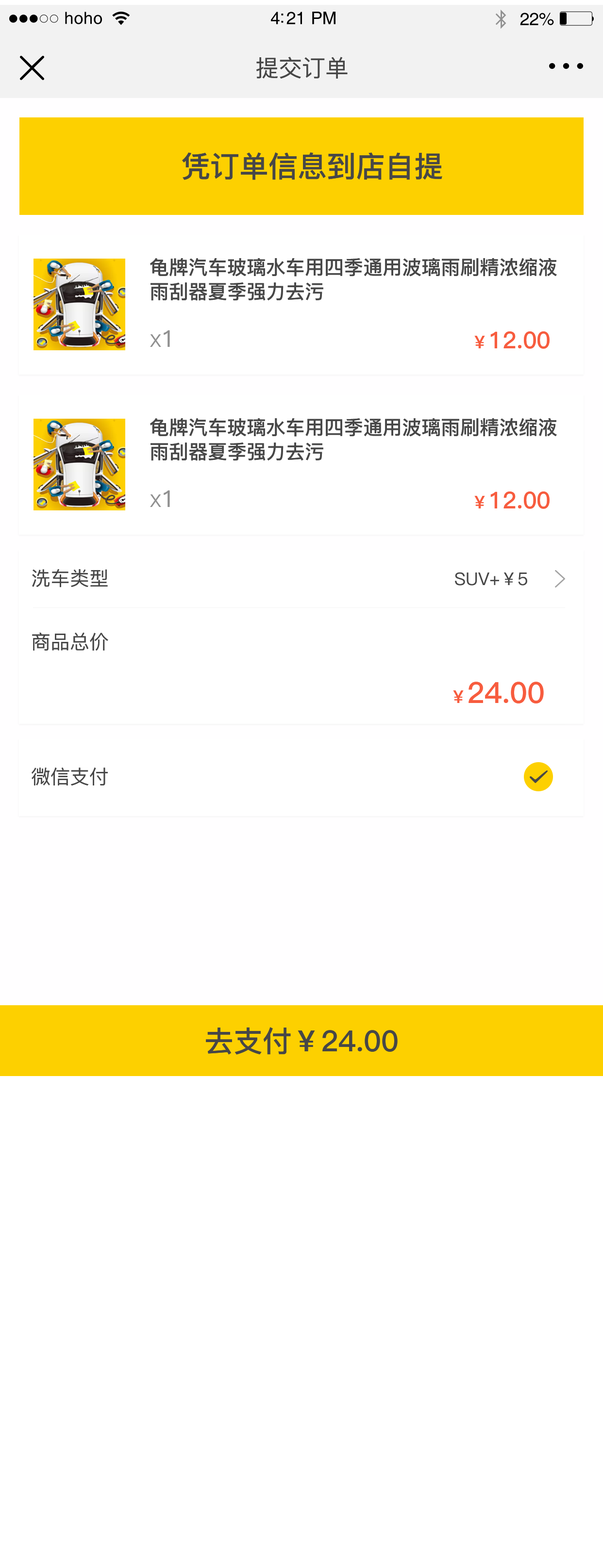
<style>
.page{position:relative;width:603px;height:1568px;background:#ffffff}
.page>*{position:absolute;margin:0}
.t1{font:16.8px "Helvetica";letter-spacing:0.02em;color:#000000}
.t2{font:17.5px "Helvetica";letter-spacing:-0.02em;color:#000000}
.t3{font:23.3px "PingFang-SC-Medium";color:#474747}
.t4{font:29.1px "PingFang-SC-Bold";color:#474747}
.t5{font:19.4px/24.3px "PingFang-SC-Bold";color:#474747}
.t6{font:17.5px "PingFang-SC-Medium";color:#909090}
.t7{font:23.3px "PingFang-SC-Medium";color:#909090}
.t8{font:23.3px "PingFang-SC-Bold";color:#f75c3e}
.t9{font:17.5px "PingFang-SC-Bold";color:#f75c3e}
.t10{font:19.4px "PingFang-SC-Medium";color:#474747}
.t11{font:17.5px "PingFang-SC-Medium";color:#474747}
.t12{font:29.1px "PingFang-SC-Bold";color:#f75c3e}
</style>
<div class="page">
<p class="t1" style="left:65px;top:12px;width:37px;height:12px">hoho</p>
<p class="t2" style="left:271px;top:12px;width:64px;height:12px">4:21 PM</p>
<p class="t2" style="left:520px;top:13px;width:34px;height:13px">22%</p>
<p class="t3" style="left:256px;top:57px;width:91px;height:22px">提交订单</p>
<p class="t4" style="left:182px;top:152px;width:260px;height:28px">凭订单信息到店自提</p>
<p class="t5" style="left:150px;top:258px;width:406px;height:43px;text-align:justify">龟牌汽车玻璃水车用四季通用波璃雨刷精浓缩液<br>雨刮器夏季强力去污</p>
<p class="t6" style="left:150px;top:330px;width:20px;height:17px">X<span class="t7">1</span></p>
<p class="t8" style="left:474px;top:331px;width:75px;height:18px"><span class="t9">￥</span>12.00</p>
<p class="t5" style="left:150px;top:418px;width:406px;height:43px;text-align:justify">龟牌汽车玻璃水车用四季通用波璃雨刷精浓缩液<br>雨刮器夏季强力去污</p>
<p class="t6" style="left:150px;top:490px;width:20px;height:17px">X<span class="t7">1</span></p>
<p class="t8" style="left:474px;top:491px;width:75px;height:18px"><span class="t9">￥</span>12.00</p>
<p class="t10" style="left:32px;top:569px;width:76px;height:19px">洗车类型</p>
<p class="t11" style="left:455px;top:572px;width:72px;height:14px">SUV+￥5</p>
<p class="t10" style="left:32px;top:632px;width:76px;height:19px">商品总价</p>
<p class="t12" style="left:453px;top:682px;width:90px;height:21px"><span class="t9">￥</span>24.00</p>
<p class="t10" style="left:32px;top:768px;width:76px;height:17px">微信支付</p>
<p class="t4" style="left:206px;top:1027px;width:191px;height:28px">去支付￥24.00</p>
</div>
